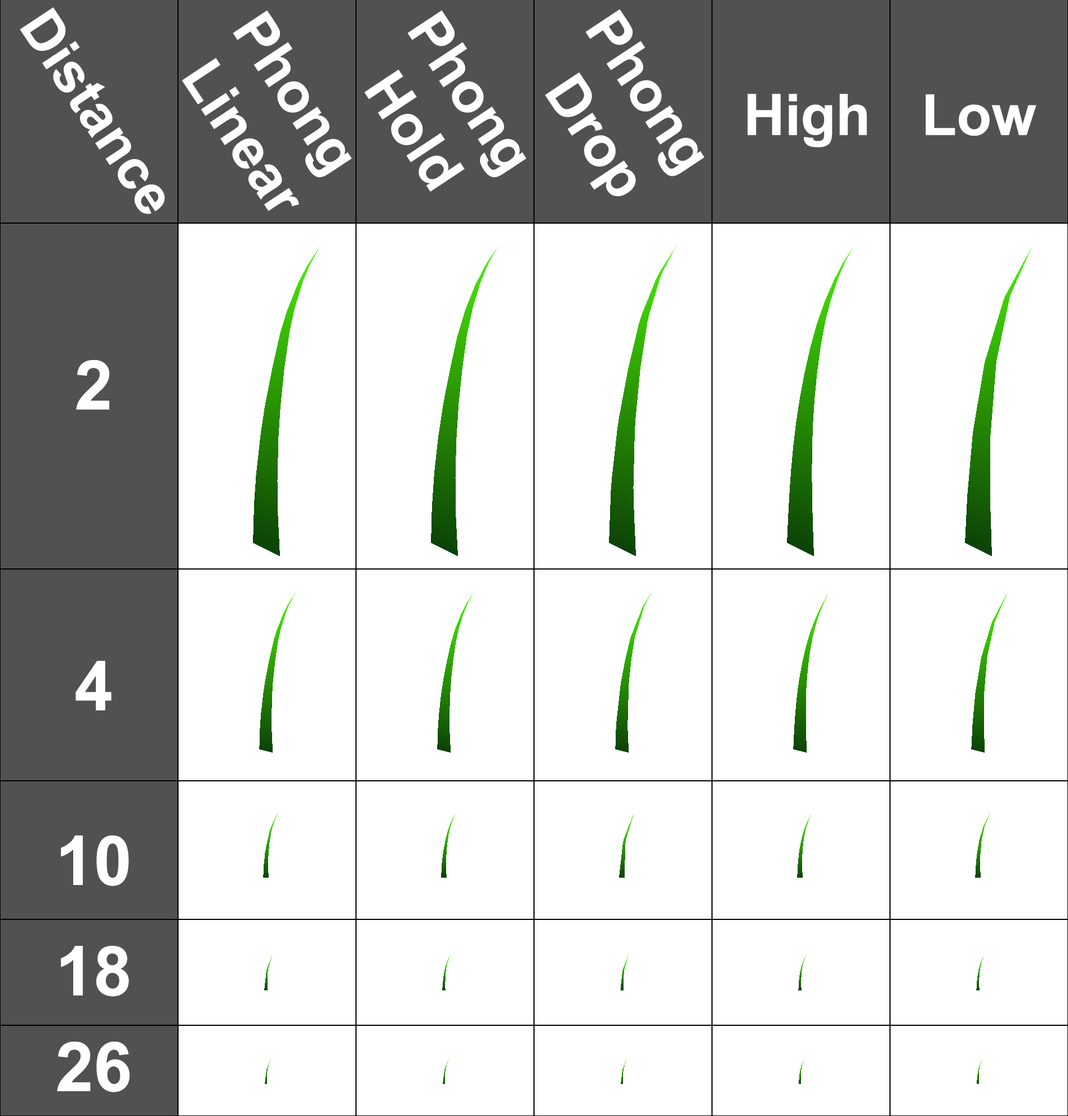
<style>
.page{position:relative;width:1068px;height:1116px;background:#ffffff}
.page>*{position:absolute;margin:0}
.t1{font:55.8px "Arial-BoldMT";color:#ffffff}
.t2{font:57.2px "Arial-BoldMT";color:#ffffff}
.t3{font:68.7px "Arial-BoldMT";color:#ffffff}
</style>
<div class="page">
<p class="t1" style="left:20px;top:7px;width:145px;height:207px;rotate:56deg">Distance</p>
<p class="t2" style="left:182px;top:10px;width:170px;height:201px;text-align:center;rotate:56deg">Phong<br> Linear</p>
<p class="t2" style="left:364px;top:10px;width:163px;height:182px;text-align:center;rotate:56deg">Phong<br>Hold</p>
<p class="t2" style="left:545px;top:9px;width:160px;height:188px;text-align:center;rotate:56deg">Phong<br> Drop</p>
<p class="t2" style="left:748px;top:94px;width:119px;height:54px">High</p>
<p class="t2" style="left:926px;top:94px;width:111px;height:42px">Low</p>
<p class="t3" style="left:76px;top:360px;width:33px;height:50px">2</p>
<p class="t3" style="left:76px;top:661px;width:36px;height:50px">4</p>
<p class="t3" style="left:61px;top:836px;width:68px;height:50px">10</p>
<p class="t3" style="left:61px;top:946px;width:68px;height:51px">18</p>
<p class="t3" style="left:57px;top:1042px;width:73px;height:51px">26</p>
</div>
